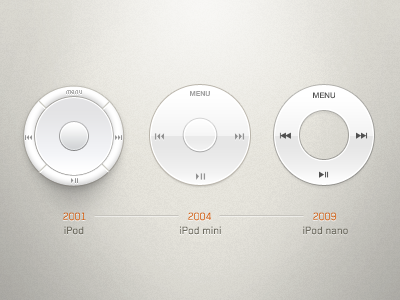
<style>
.page{position:relative;width:400px;height:300px}
.page>*{position:absolute;margin:0}
.t1{font:7px "Helvetica35-Thin";color:#b3b3b3}
.t2{font:6.9px "Helvetica75-Bold";color:#a1a1a1}
.t3{font:7.8px "Helvetica65-Medium";color:#505050}
.t4{font:12px "Blender-Thin"}
.t5{font:12px "Blender-Thin";color:#ce5200}
.t6{font:12px "Blender-Book";color:#6e6c61}
</style>
<div class="page">
<p class="t1" style="left:66px;top:90px;width:16px;height:4px">menu</p>
<p class="t2" style="left:190px;top:91px;width:20px;height:5px">MENU</p>
<p class="t3" style="left:313px;top:92px;width:22px;height:7px">MENU</p>
<p class="t4" style="left:63px;top:212px;width:23px;height:9px">2001</p>
<p class="t5" style="left:188px;top:212px;width:23px;height:9px">2004</p>
<p class="t4" style="left:313px;top:212px;width:23px;height:9px">2009</p>
<p class="t6" style="left:64px;top:226px;width:20px;height:9px">iPod</p>
<p class="t6" style="left:180px;top:226px;width:41px;height:9px">iPod mini</p>
<p class="t6" style="left:303px;top:226px;width:45px;height:9px">iPod nano</p>
</div>
